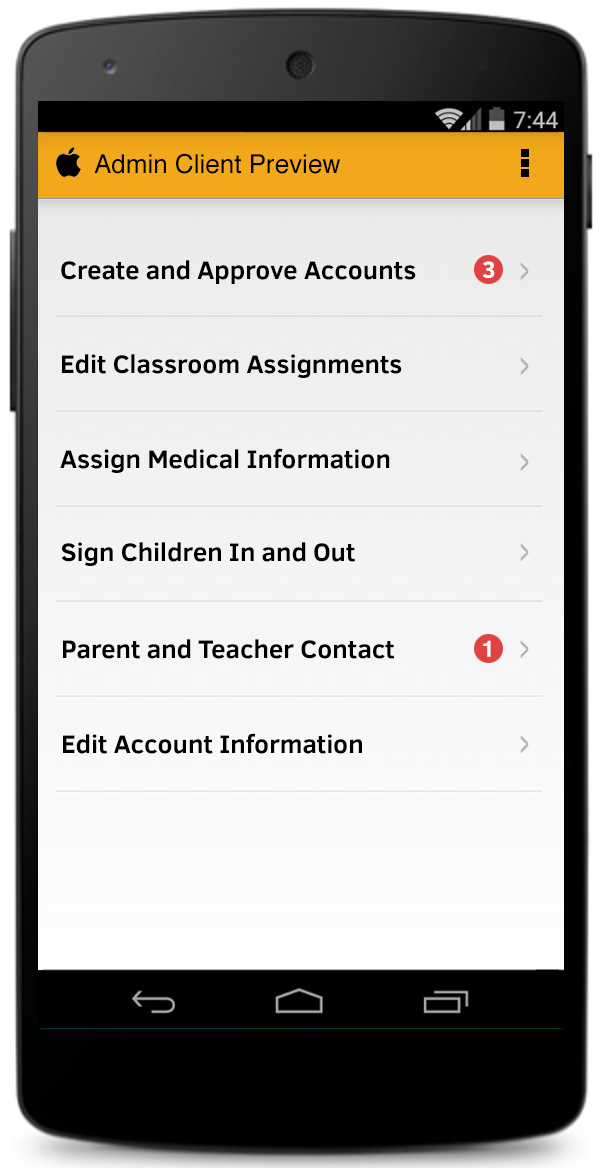
<style>
.page{position:relative;width:600px;height:1168px}
.page>*{position:absolute;margin:0}
.t1{font:26px "Helvetica";color:#000000}
.t2{font:26px "ClearSans-Bold";color:#000000}
.t3{font:23.6px "ClearSans-Bold";color:#ffffff}
.t4{font:31.4px "ClearSans-Bold";color:#b3b3b3;scale:0.41 1}
</style>
<div class="page">
<p class="t1" style="left:94px;top:153px;width:246px;height:21px">Admin Client Preview</p>
<p class="t2" style="left:61px;top:260px;width:355px;height:24px">Create and Approve Accounts</p>
<p class="t3" style="left:482px;top:261px;width:13px;height:17px">3</p>
<p class="t4" style="left:520px;top:262px;width:9px;height:19px">&gt;</p>
<p class="t2" style="left:62px;top:354px;width:340px;height:24px">Edit Classroom Assignments</p>
<p class="t4" style="left:520px;top:357px;width:9px;height:19px">&gt;</p>
<p class="t2" style="left:60px;top:448px;width:330px;height:25px">Assign Medical Information</p>
<p class="t4" style="left:520px;top:453px;width:9px;height:19px">&gt;</p>
<p class="t2" style="left:61px;top:542px;width:294px;height:24px">Sign Children In and Out</p>
<p class="t4" style="left:520px;top:543px;width:9px;height:19px">&gt;</p>
<p class="t2" style="left:63px;top:639px;width:332px;height:20px">Parent and Teacher Contact</p>
<p class="t3" style="left:483px;top:640px;width:8px;height:17px">1</p>
<p class="t4" style="left:520px;top:640px;width:9px;height:19px">&gt;</p>
<p class="t2" style="left:63px;top:733px;width:299px;height:21px">Edit Account Information</p>
<p class="t4" style="left:520px;top:735px;width:9px;height:19px">&gt;</p>
</div>
